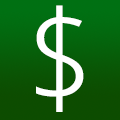
<style>
.page{position:relative;width:120px;height:120px}
.page>*{position:absolute;margin:0}
.t1{font:129.8px "OpenSans-CondensedLight";letter-spacing:-0.01em;color:#ffffff;scale:1.18 1}
</style>
<div class="page">
<p class="t1" style="left:36px;top:5px;width:48px;height:107px">$</p>
</div>
